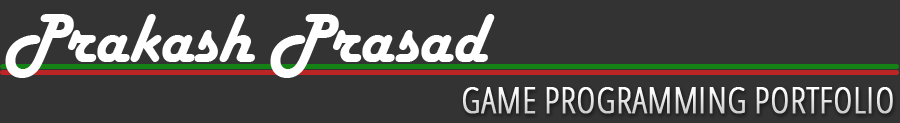
<style>
.page{position:relative;width:900px;height:123px;background:#333333}
.page>*{position:absolute;margin:0}
.t1{font:72px "HarlowSolid";color:#ffffff}
.t2{font:36px "OpenSans-CondensedLight";text-transform:uppercase;font-weight:bold}
</style>
<div class="page">
<p class="t1" style="left:5px;top:14px;width:490px;height:64px">Prakash Prasad</p>
<p class="t2" style="left:463px;top:87px;width:430px;height:27px">Game Programming Portfolio</p>
</div>
